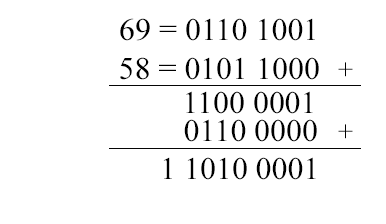
<style>
.page{position:relative;width:386px;height:224px;background:#ffffff}
.page>*{position:absolute;margin:0}
.t1{font:31.9px "TimesNewRomanPSMT";color:#000000}
.t2{font:26.8px "TimesNewRomanPSMT";color:#000000}
</style>
<div class="page">
<p class="t1" style="left:120px;top:18px;width:199px;height:62px;text-align:center">69 = 0110 1001<br>58 = 0101 1000</p>
<p class="t2" style="left:338px;top:62px;width:15px;height:15px">+</p>
<p class="t1" style="left:186px;top:91px;width:127px;height:23px">1100 0001</p>
<p class="t1" style="left:184px;top:119px;width:133px;height:23px">0110 0000</p>
<p class="t2" style="left:338px;top:124px;width:15px;height:15px">+</p>
<p class="t1" style="left:163px;top:157px;width:153px;height:23px">1 1010 0001</p>
</div>
